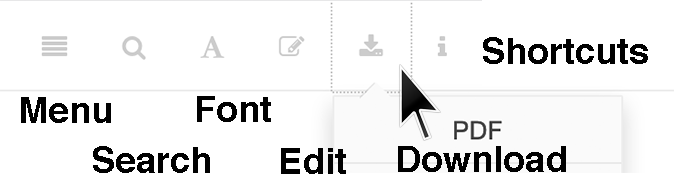
<style>
.page{position:relative;width:674px;height:178px;background:#ffffff}
.page>*{position:absolute;margin:0}
.t1{font:36px "Helvetica-Bold";color:#000000}
</style>
<div class="page">
<p class="t1" style="left:483px;top:37px;width:165px;height:27px">Shortcuts</p>
<p class="t1" style="left:21px;top:97px;width:90px;height:26px">Menu</p>
<p class="t1" style="left:197px;top:96px;width:74px;height:26px">Font</p>
<p class="t1" style="left:93px;top:146px;width:117px;height:27px">Search</p>
<p class="t1" style="left:281px;top:148px;width:65px;height:26px">Edit</p>
<p class="t1" style="left:398px;top:146px;width:168px;height:26px">Download</p>
</div>
